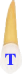
<style>
.page{position:relative;width:22px;height:74px;background:#ffffff}
.page>*{position:absolute;margin:0}
.t1{font:16.7px "BodoniBT-Bold";color:#3333ff}
</style>
<div class="page">
<p class="t1" style="left:5px;top:53px;width:11px;height:12px">T</p>
</div>
